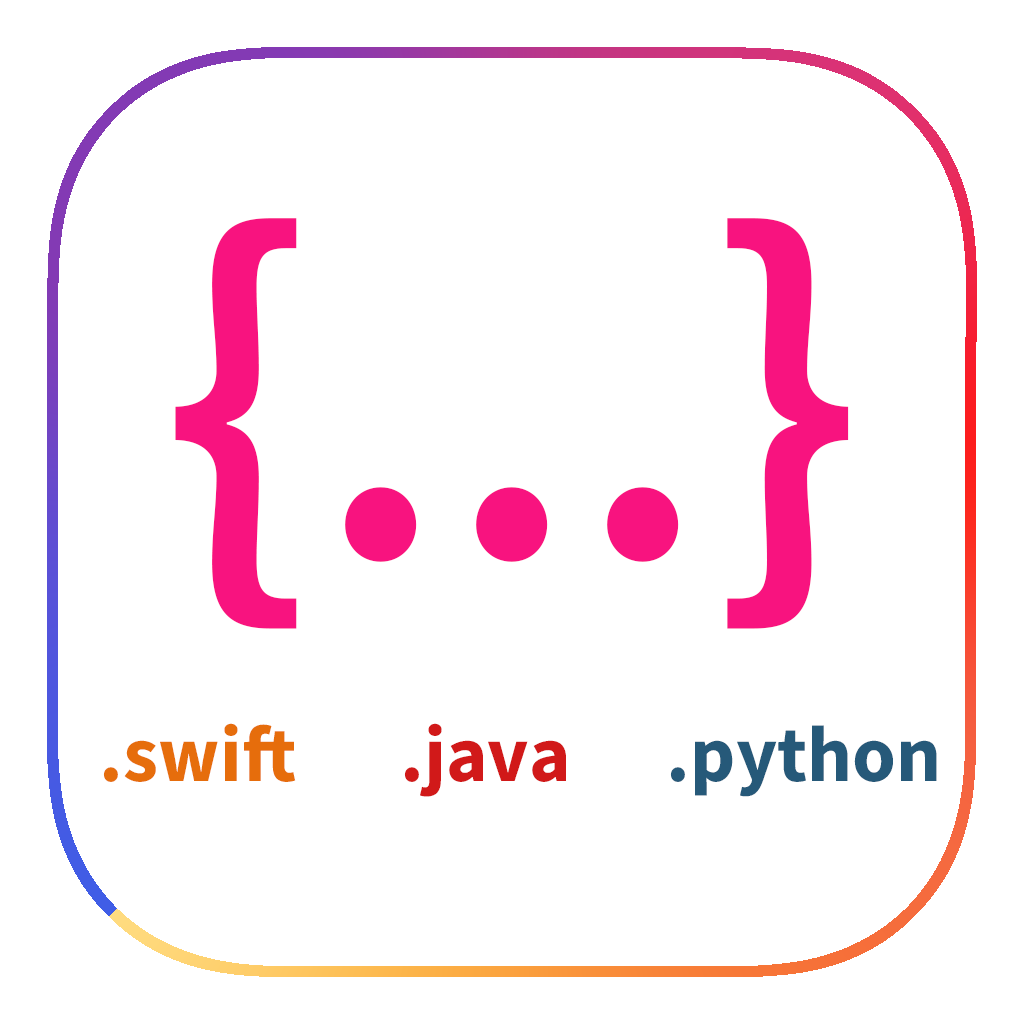
<style>
.page{position:relative;width:1024px;height:1024px;background:#ffffff}
.page>*{position:absolute;margin:0}
.t1{font:477.1px "SourceSansRoman-Semibold";color:#f8137f}
.t2{font:79.2px "SourceSansRoman-Bold";color:#e66d0c}
.t3{font:79.2px "SourceSansRoman-Bold";color:#d11919}
.t4{font:79.2px "SourceSansRoman-Bold";color:#265979}
</style>
<div class="page">
<p class="t1" style="left:175px;top:218px;width:674px;height:411px">{...}</p>
<p class="t2" style="left:103px;top:723px;width:193px;height:59px">.swift</p>
<p class="t3" style="left:404px;top:723px;width:162px;height:74px">.java</p>
<p class="t4" style="left:670px;top:725px;width:267px;height:72px">.python</p>
</div>
